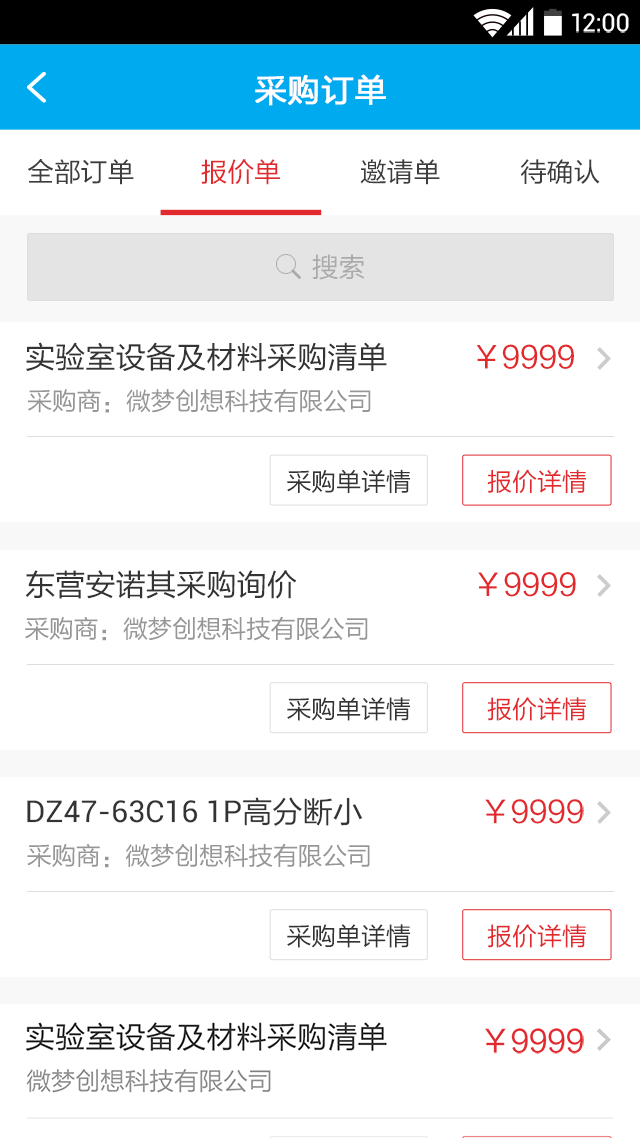
<style>
.page{position:relative;width:640px;height:1138px;background:#ffffff}
.page>*{position:absolute;margin:0}
.t1{font:24.9px "Roboto-Regular";color:#ffffff}
.t2{font:32px "FZLTHJW--GB1-0";letter-spacing:0.02em;color:#ffffff;font-weight:bold}
.t3{font:26.7px "FZLTHJW--GB1-0";color:#3d3d3d}
.t4{font:26.7px "FZLTHJW--GB1-0";color:#e1292e}
.t5{font:26.7px "FZLTHJW--GB1-0";color:#ababab}
.t6{font:30.2px "FZLTHJW--GB1-0";color:#333333}
.t7{font:30.2px "FZLTHJW--GB1-0";color:#e1292e}
.t8{font:24.9px "FZLTHJW--GB1-0";letter-spacing:-0.01em;color:#969696;text-transform:uppercase}
.t9{font:24.9px "FZLTHJW--GB1-0";color:#333333}
.t10{font:24.9px "FZLTHJW--GB1-0";color:#e1292e}
.t11{font:30.2px "Roboto-Regular";color:#333333}
</style>
<div class="page">
<p class="t1" style="left:572px;top:13px;width:57px;height:20px">12:00</p>
<p class="t2" style="left:255px;top:74px;width:131px;height:32px">采购订单</p>
<p class="t3" style="left:28px;top:159px;width:106px;height:26px">全部订单</p>
<p class="t4" style="left:201px;top:159px;width:79px;height:26px">报价单</p>
<p class="t3" style="left:360px;top:159px;width:80px;height:26px">邀请单</p>
<p class="t3" style="left:520px;top:159px;width:80px;height:25px">待确认</p>
<p class="t5" style="left:312px;top:254px;width:53px;height:26px">搜索</p>
<p class="t6" style="left:26px;top:342px;width:548px;height:29px">实验室设备及材料采购清单          <span class="t7">￥9999</span></p>
<p class="t8" style="left:28px;top:389px;width:343px;height:24px">采购商：微梦创想科技有限公司</p>
<p class="t9" style="left:287px;top:469px;width:123px;height:24px">采购单详情</p>
<p class="t10" style="left:487px;top:469px;width:99px;height:25px">报价详情</p>
<p class="t6" style="left:25px;top:570px;width:551px;height:29px">东营安诺其采购询价                     <span class="t7">￥9999</span></p>
<p class="t8" style="left:25px;top:616px;width:343px;height:25px">采购商：微梦创想科技有限公司</p>
<p class="t9" style="left:287px;top:697px;width:123px;height:24px">采购单详情</p>
<p class="t10" style="left:487px;top:697px;width:99px;height:24px">报价详情</p>
<p class="t11" style="left:27px;top:797px;width:557px;height:30px">DZ47-63C16 1P<span class="t6">高分断小              </span><span class="t7">￥9999</span></p>
<p class="t8" style="left:27px;top:843px;width:343px;height:25px">采购商：微梦创想科技有限公司</p>
<p class="t9" style="left:287px;top:924px;width:123px;height:24px">采购单详情</p>
<p class="t10" style="left:487px;top:924px;width:99px;height:24px">报价详情</p>
</div>
